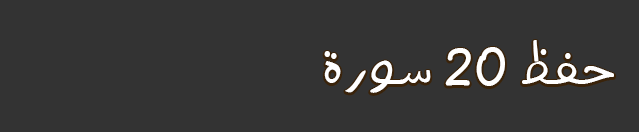
<style>
.page{position:relative;width:639px;height:132px;background:#333333}
.page>*{position:absolute;margin:0}
.t1{font:70px "Aref_Menna-Light";letter-spacing:0.04em;color:#ffffff}
</style>
<div class="page">
<p class="t1" style="left:324px;top:40px;width:290px;height:53px">حفظ 20 سورة</p>
</div>
